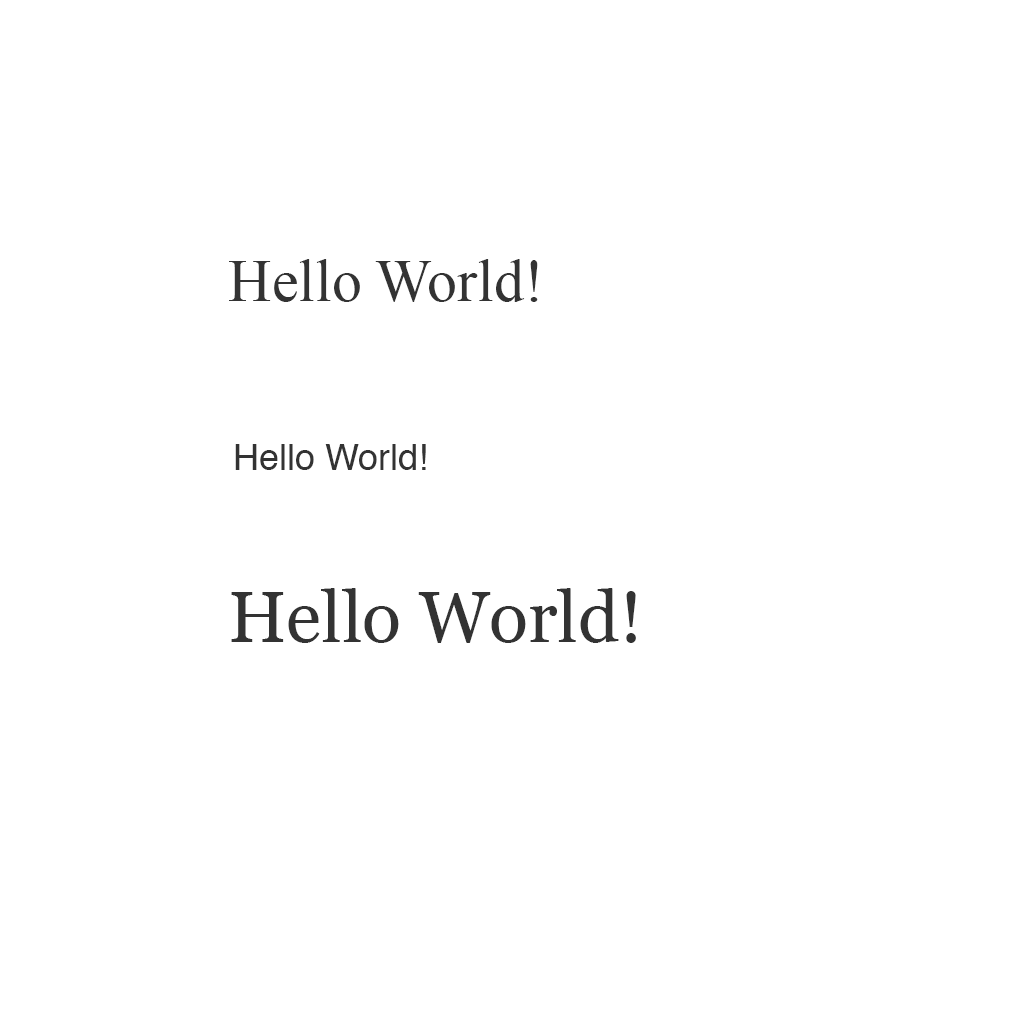
<style>
.page{position:relative;width:1024px;height:1024px;background:#ffffff}
.page>*{position:absolute;margin:0}
.t1{font:60px "TimesNewRomanPSMT";color:#333333}
.t2{font:36px "Helvetica";color:#333333}
.t3{font:72px "Georgia";color:#333333}
</style>
<div class="page">
<p class="t1" style="left:229px;top:259px;width:309px;height:43px">Hello World!</p>
<p class="t2" style="left:235px;top:444px;width:191px;height:26px">Hello World!</p>
<p class="t3" style="left:231px;top:588px;width:405px;height:55px">Hello World!</p>
</div>
